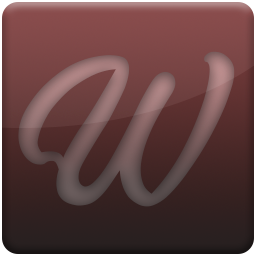
<style>
.page{position:relative;width:256px;height:256px}
.page>*{position:absolute;margin:0}
.t1{font:160px "Reality-Sunday-light"}
</style>
<div class="page">
<p class="t1" style="left:18px;top:51px;width:217px;height:156px">W</p>
</div>
